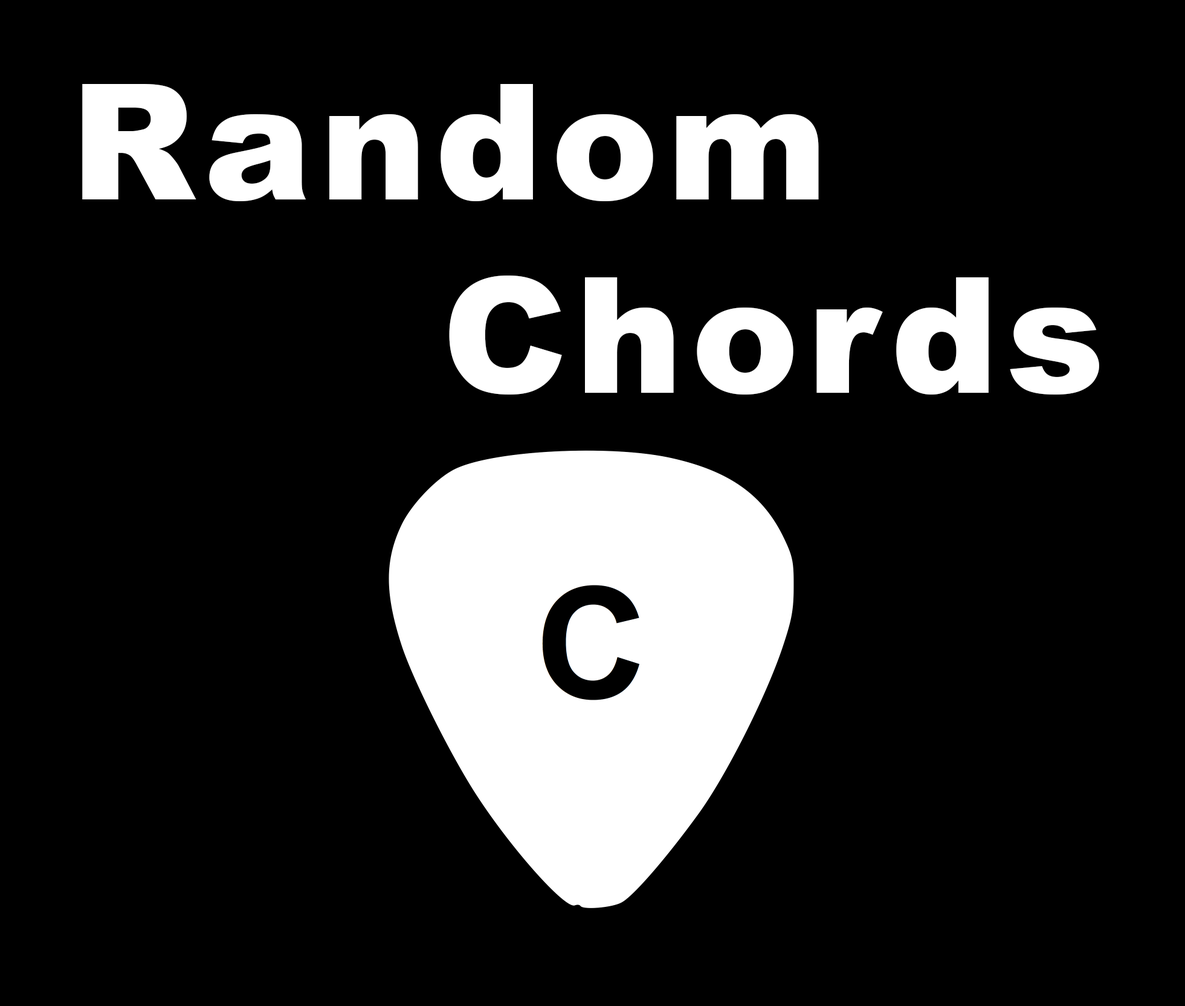
<style>
.page{position:relative;width:1185px;height:1006px;background:#000000}
.page>*{position:absolute;margin:0}
.t1{font:161.4px "Arial-Black";letter-spacing:0.05em;color:#ffffff}
</style>
<div class="page">
<p class="t1" style="left:82px;top:84px;width:1017px;height:311px">Random<br>      Chords</p>
</div>
